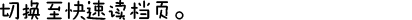
<style>
.page{position:relative;width:412px;height:20px;background:#ffffff}
.page>*{position:absolute;margin:0}
.t1{font:24px "¢è?";color:#000000}
</style>
<div class="page">
<p class="t1" style="left:0px;top:0px;width:184px;height:20px">切换至快速读档页。</p>
</div>
